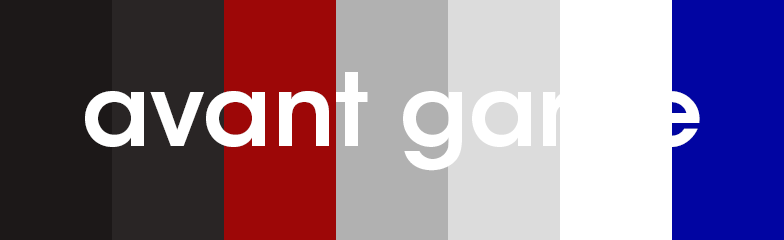
<style>
.page{position:relative;width:784px;height:240px;background:#ffffff}
.page>*{position:absolute;margin:0}
.t1{font:100px "ITCAvantGardeStd-Demi";color:#ffffff}
</style>
<div class="page">
<p class="t1" style="left:85px;top:72px;width:615px;height:99px">avant garde</p>
</div>
